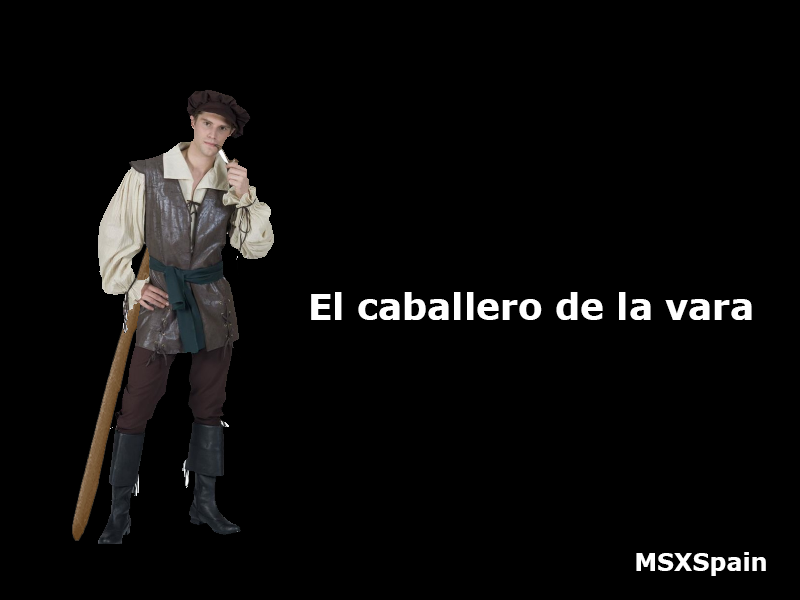
<style>
.page{position:relative;width:800px;height:600px;background:#000000}
.page>*{position:absolute;margin:0}
.t1{font:36px "Verdana-Bold";color:#ffffff}
.t2{font:24px "Verdana-Bold";color:#ffffff}
</style>
<div class="page">
<p class="t1" style="left:311px;top:292px;width:441px;height:28px">El caballero de la vara</p>
<p class="t2" style="left:636px;top:552px;width:130px;height:24px">MSXSpain</p>
</div>
